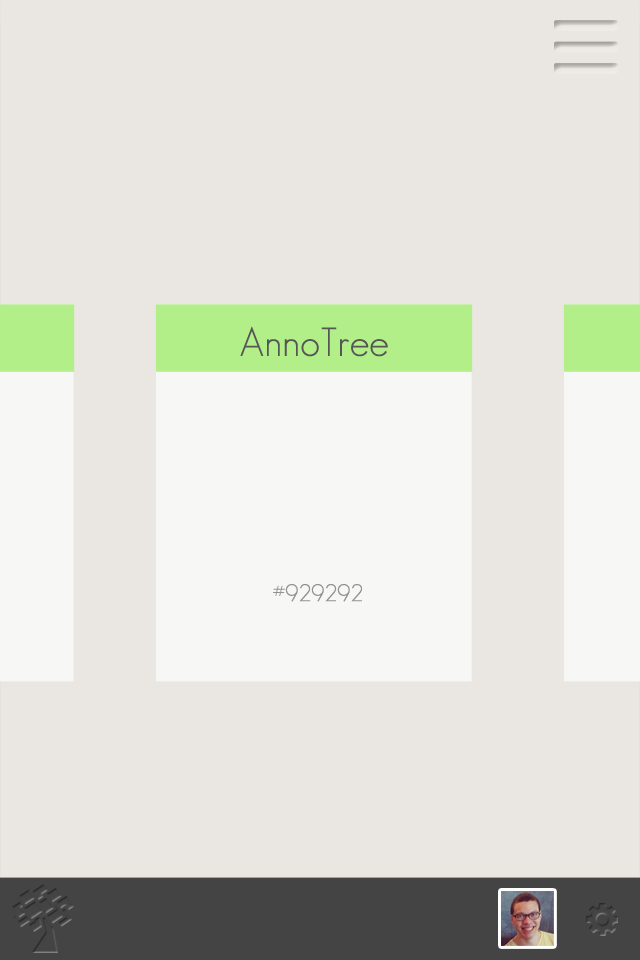
<style>
.page{position:relative;width:640px;height:960px;background:#eae6e1}
.page>*{position:absolute;margin:0}
.t1{font:39.7px "GeosansLight";color:#565656}
.t2{font:23.8px "GeosansLight";color:#929292}
</style>
<div class="page">
<p class="t1" style="left:240px;top:326px;width:148px;height:31px">AnnoTree</p>
<p class="t2" style="left:273px;top:584px;width:90px;height:18px">#929292</p>
</div>
